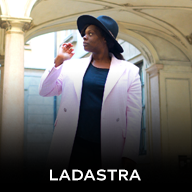
<style>
.page{position:relative;width:192px;height:192px}
.page>*{position:absolute;margin:0}
.t1{font:15.1px "TypoldExtended-Medium";color:#ffffff}
</style>
<div class="page">
<p class="t1" style="left:50px;top:169px;width:91px;height:12px">LADASTRA</p>
</div>
